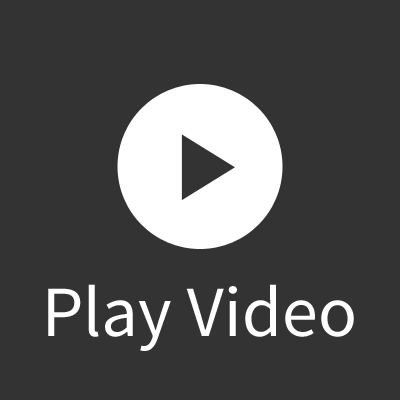
<style>
.page{position:relative;width:400px;height:400px;background:#333333}
.page>*{position:absolute;margin:0}
.t1{font:72px "SourceSansPro-Regular";color:#ffffff}
</style>
<div class="page">
<p class="t1" style="left:48px;top:284px;width:306px;height:67px">Play Video</p>
</div>
